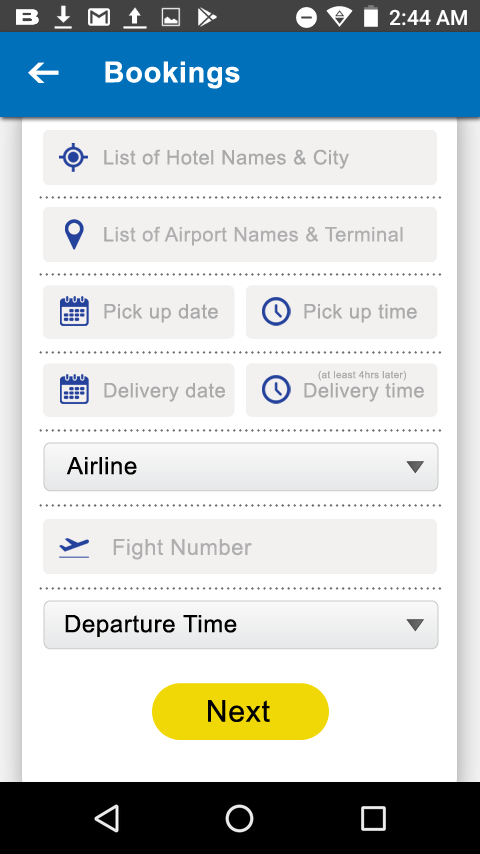
<style>
.page{position:relative;width:480px;height:854px;background:#ffffff}
.page>*{position:absolute;margin:0}
.t1{font:29px "Arial-BoldMT";letter-spacing:0.025em;color:#ffffff}
.t2{font:20px "ArialMT";letter-spacing:0.025em;color:#aaaaaa}
.t3{font:20px "ArialMT";letter-spacing:0.025em;color:#afafaf}
.t4{font:10px "ArialMT";letter-spacing:0.025em;color:#aaaaaa}
.t5{font:24px "ArialMT";letter-spacing:0.025em;color:#000000}
.t6{font:22px "ArialMT";letter-spacing:0.025em;color:#afafaf}
.t7{font:30px "ArialMT";letter-spacing:0.025em;color:#000000}
</style>
<div class="page">
<p class="t1" style="left:105px;top:61px;width:135px;height:28px">Bookings</p>
<p class="t2" style="left:104px;top:149px;width:245px;height:20px">List of Hotel Names &amp; City</p>
<p class="t3" style="left:104px;top:226px;width:299px;height:20px"><span class="t2">L</span>ist of Airport Names &amp; Terminal</p>
<p class="t2" style="left:104px;top:304px;width:114px;height:19px">Pick up date</p>
<p class="t2" style="left:304px;top:304px;width:113px;height:19px">Pick up time</p>
<p class="t4" style="left:318px;top:370px;width:89px;height:11px">(at least 4hrs later)</p>
<p class="t2" style="left:104px;top:383px;width:121px;height:19px">Delivery date</p>
<p class="t2" style="left:304px;top:383px;width:120px;height:19px">Delivery time</p>
<p class="t5" style="left:66px;top:457px;width:71px;height:18px">Airline</p>
<p class="t6" style="left:113px;top:539px;width:139px;height:21px">Fight Number</p>
<p class="t5" style="left:65px;top:615px;width:172px;height:22px">Departure Time</p>
<p class="t7" style="left:208px;top:700px;width:62px;height:22px">Next</p>
</div>
